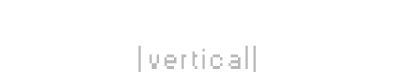
<style>
.page{position:relative;width:393px;height:73px;background:#ffffff}
.page>*{position:absolute;margin:0}
.t1{font:31px "Small Fonts";letter-spacing:0.1em;color:#b8b8b8}
</style>
<div class="page">
<p class="t1" style="left:138px;top:45px;width:118px;height:27px">|vertical|</p>
</div>
